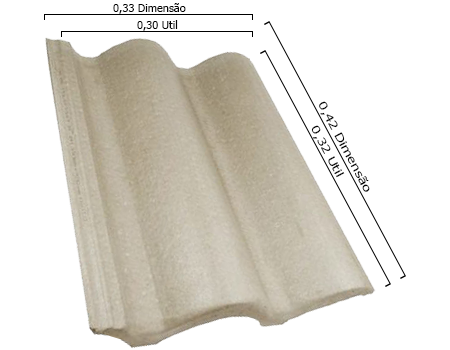
<style>
.page{position:relative;width:450px;height:350px;background:#ffffff}
.page>*{position:absolute;margin:0}
.t1{font:11px "Tahoma";color:#030303}
.t2{font:11px "Tahoma";color:#030303;scale:1.39 1}
</style>
<div class="page">
<p class="t1" style="left:113px;top:3px;width:73px;height:11px">0,33 Dimensão</p>
<p class="t1" style="left:137px;top:20px;width:41px;height:11px">0,30 Util</p>
<p class="t2" style="left:319px;top:101px;width:51px;height:91px;rotate:62deg">0,42 Dimensão</p>
<p class="t2" style="left:311px;top:125px;width:34px;height:53px;rotate:62deg">0,32 Util</p>
</div>
